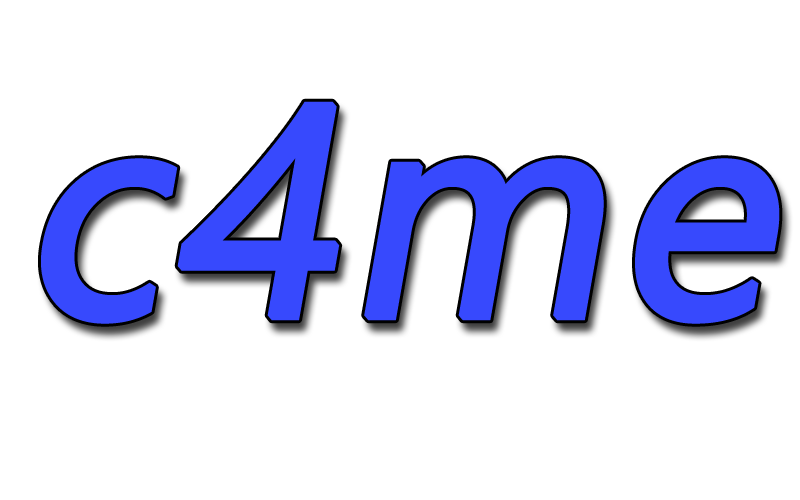
<style>
.page{position:relative;width:800px;height:500px;background:#ffffff}
.page>*{position:absolute;margin:0}
.t1{font:300px "Gadugi";letter-spacing:0.01em;color:#384afd;font-weight:bold;font-style:italic}
</style>
<div class="page">
<p class="t1" style="left:41px;top:101px;width:739px;height:223px">c4me</p>
</div>
